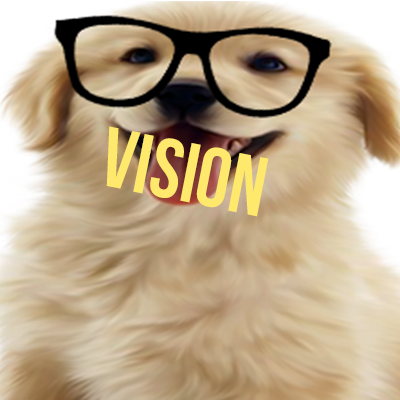
<style>
.page{position:relative;width:400px;height:400px}
.page>*{position:absolute;margin:0}
.t1{font:84px "BebasNeue";color:#fee96c}
</style>
<div class="page">
<p class="t1" style="left:106px;top:126px;width:163px;height:91px;rotate:11deg">Vision</p>
</div>
